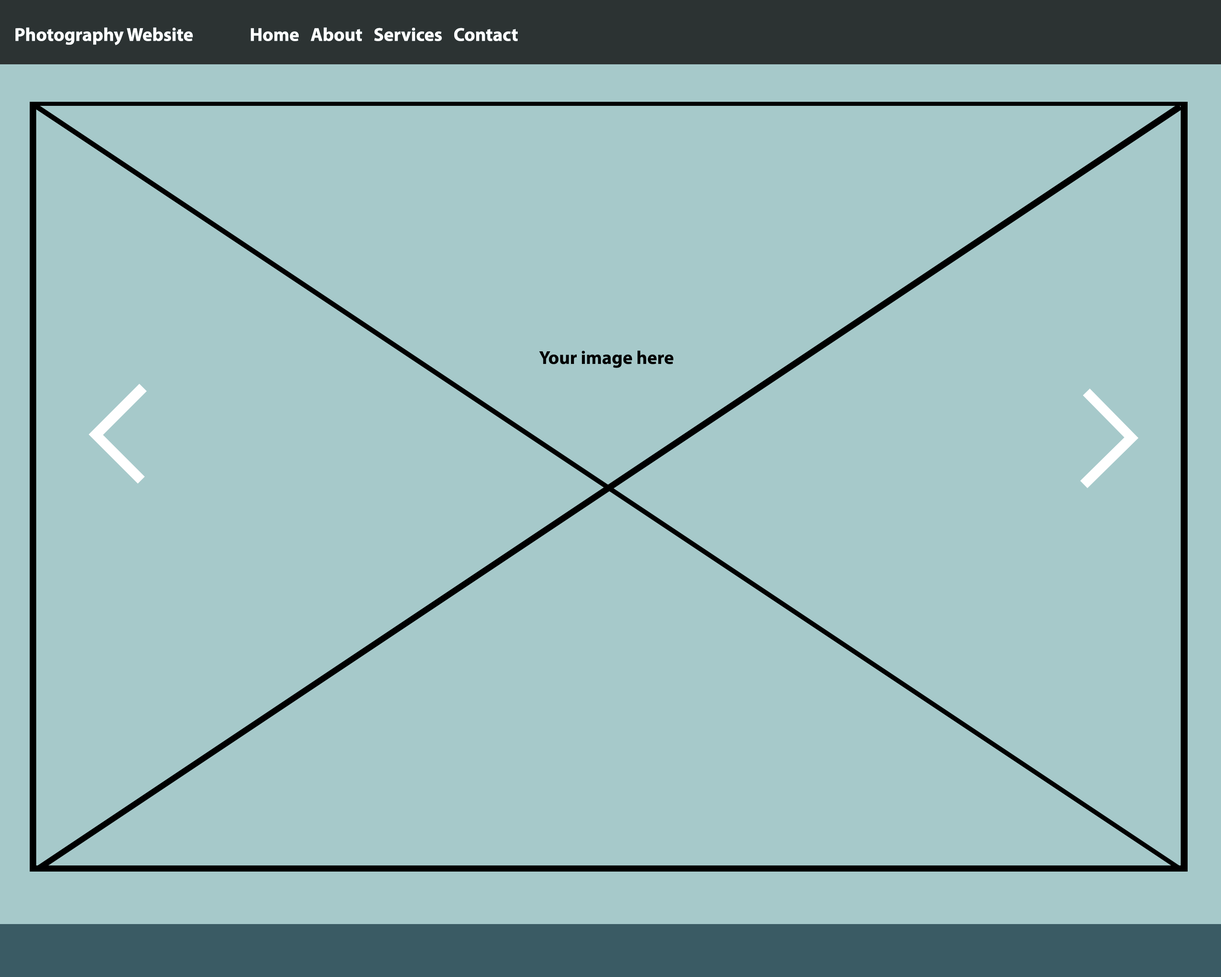
<style>
.page{position:relative;width:1221px;height:977px;background:#a6c9ca}
.page>*{position:absolute;margin:0}
.t1{font:18.7px "MyriadPro-Bold";color:#ffffff}
.t2{font:18.7px "MyriadPro-Bold";color:#000000}
</style>
<div class="page">
<p class="t1" style="left:15px;top:27px;width:503px;height:18px">Photography Website               Home   About   Services   Contact</p>
<p class="t2" style="left:539px;top:350px;width:135px;height:18px">Your image here</p>
</div>
